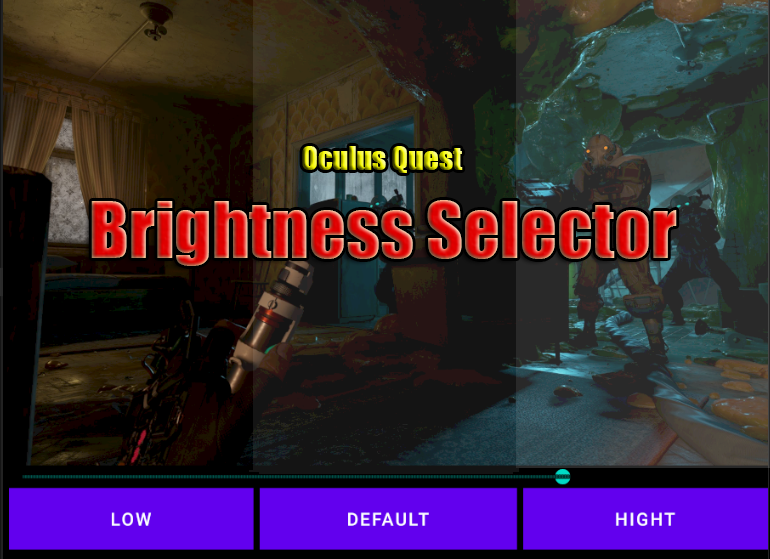
<style>
.page{position:relative;width:770px;height:559px}
.page>*{position:absolute;margin:0}
.t1{font:30px "Impact"}
.t2{font:72px "Impact"}
</style>
<div class="page">
<p class="t1" style="left:302px;top:146px;width:161px;height:27px">Oculus Quest</p>
<p class="t2" style="left:91px;top:200px;width:586px;height:66px">Brightness Selector</p>
</div>
